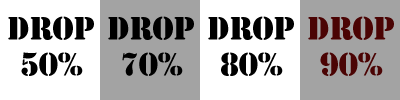
<style>
.page{position:relative;width:400px;height:100px;background:#a3a3a3}
.page>*{position:absolute;margin:0}
.t1{font:30px "StencilStd";color:#000000}
.t2{font:30px "StencilStd";color:#4b0404}
</style>
<div class="page">
<p class="t1" style="left:8px;top:16px;width:86px;height:60px;text-align:center">Drop<br>50%</p>
<p class="t1" style="left:108px;top:16px;width:86px;height:60px;text-align:center">Drop<br>70%</p>
<p class="t1" style="left:208px;top:16px;width:86px;height:60px;text-align:center">Drop<br>80%</p>
<p class="t2" style="left:308px;top:16px;width:86px;height:60px;text-align:center">Drop<br>90%</p>
</div>
